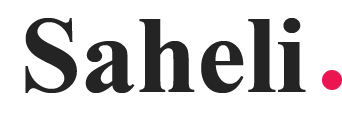
<style>
.page{position:relative;width:342px;height:114px;background:#ffffff}
.page>*{position:absolute;margin:0}
.t1{font:110px "TimesNewRomanPS-BoldMT";color:#252424}
</style>
<div class="page">
<p class="t1" style="left:25px;top:18px;width:281px;height:75px">Saheli</p>
</div>
